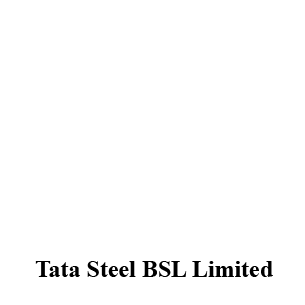
<style>
.page{position:relative;width:305px;height:305px;background:#ffffff}
.page>*{position:absolute;margin:0}
.t1{font:24px "TimesNewRomanPS-BoldMT";color:#000000}
</style>
<div class="page">
<p class="t1" style="left:35px;top:261px;width:238px;height:16px">Tata Steel BSL Limited</p>
</div>
